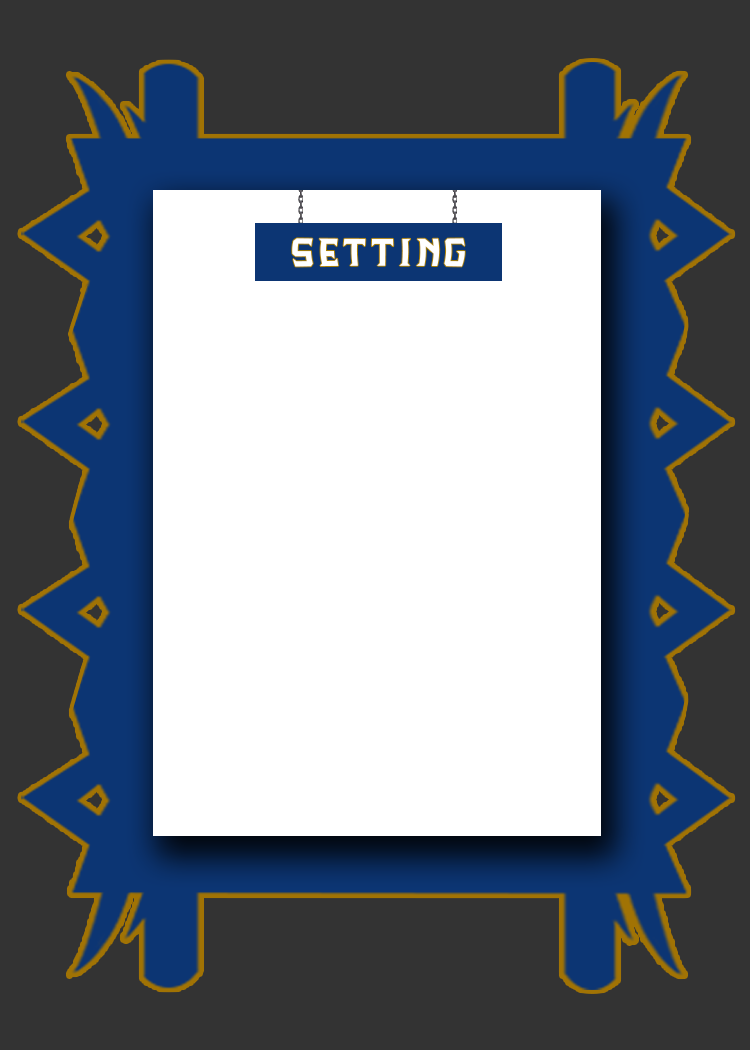
<style>
.page{position:relative;width:750px;height:1050px;background:#ffffff}
.page>*{position:absolute;margin:0}
.t1{font:40.8px "Lorde-Havana";letter-spacing:0.1em;color:#ffffff}
</style>
<div class="page">
<p class="t1" style="left:292px;top:238px;width:173px;height:29px">Setting</p>
</div>
